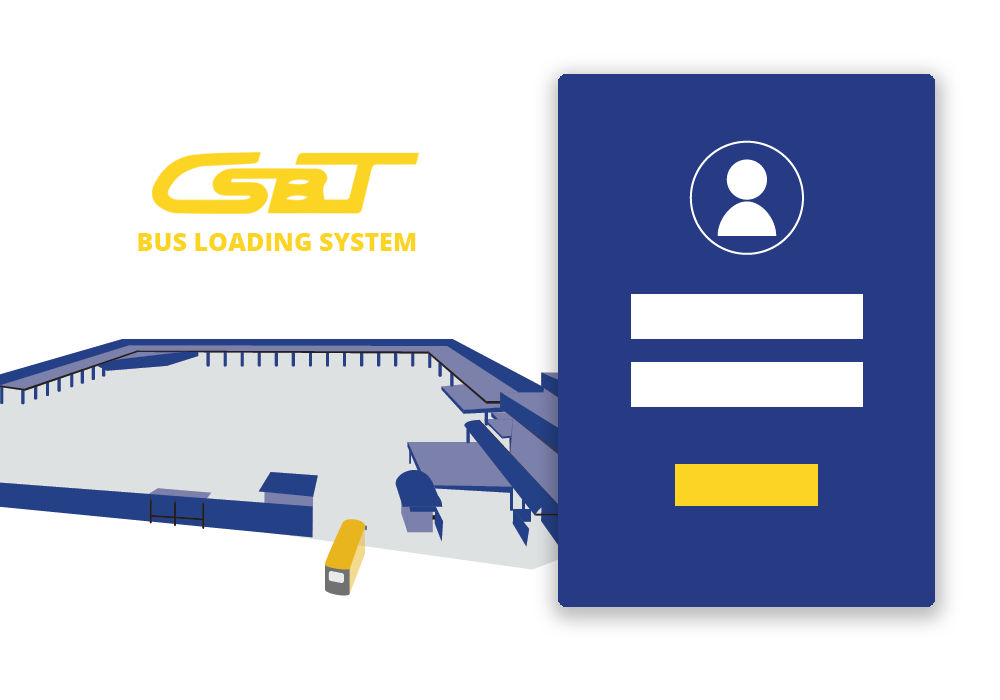
<style>
.page{position:relative;width:1000px;height:700px;background:#ffffff}
.page>*{position:absolute;margin:0}
.t1{font:25px "OpenSans-Extrabold";color:#fcd424}
</style>
<div class="page">
<p class="t1" style="left:138px;top:233px;width:278px;height:18px">BUS LOADING SYSTEM</p>
</div>
